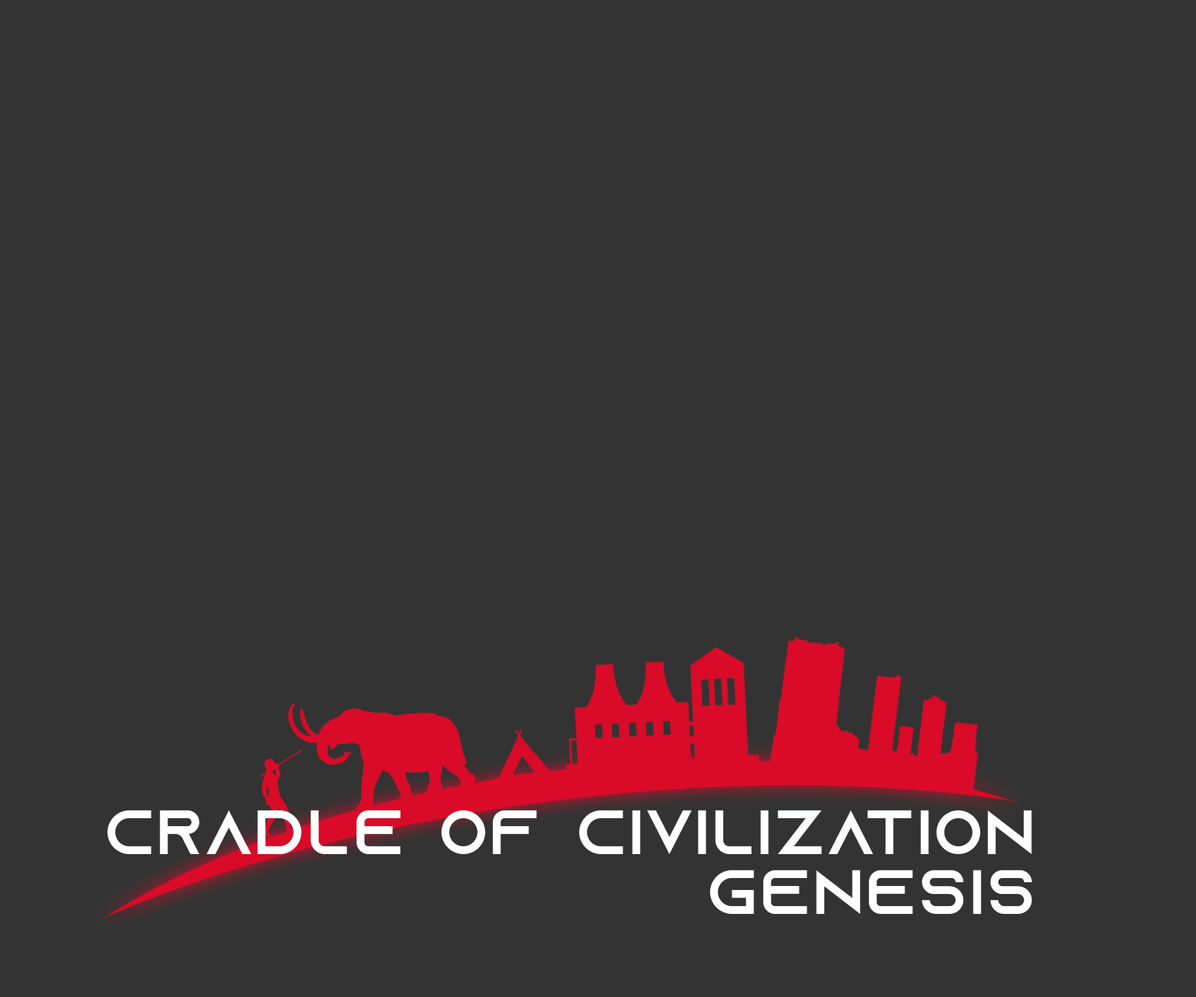
<style>
.page{position:relative;width:1196px;height:997px;background:#333333}
.page>*{position:absolute;margin:0}
.t1{font:62.5px "AzonixRegular";letter-spacing:0.05em;color:#ffffff}
</style>
<div class="page">
<p class="t1" style="left:107px;top:810px;width:925px;height:44px">Cradle of Civilization</p>
<p class="t1" style="left:710px;top:870px;width:322px;height:44px">genesis</p>
</div>
